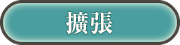
<style>
.page{position:relative;width:180px;height:45px;background:#4a9e9f}
.page>*{position:absolute;margin:0}
.t1{font:24px "RyuminPr6N-ExBold";color:#fffcf7}
</style>
<div class="page">
<p class="t1" style="left:65px;top:11px;width:48px;height:23px">擴張</p>
</div>
